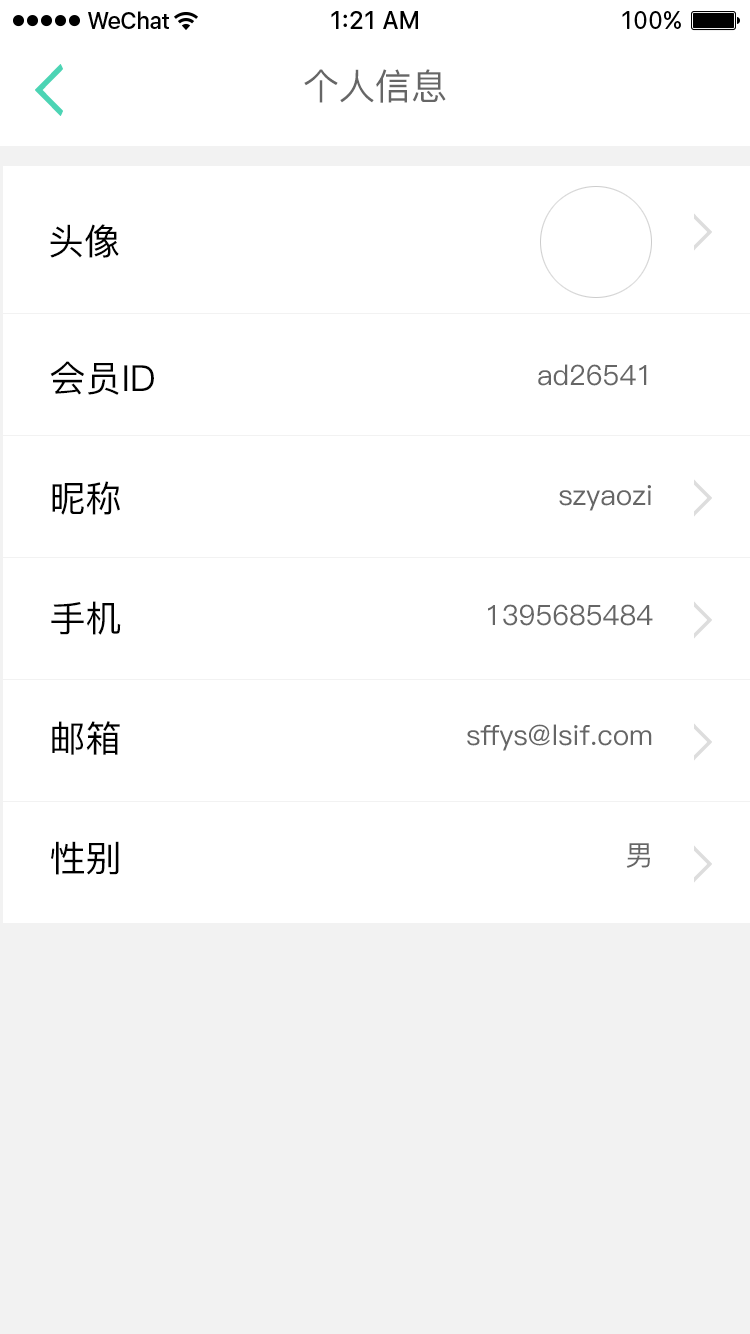
<style>
.page{position:relative;width:750px;height:1334px;background:#ffffff}
.page>*{position:absolute;margin:0}
.t1{font:36px "PingFang-SC-Medium";color:#666666}
.t2{font:36px "PingFang-SC-Medium";color:#000000}
.t3{font:36px/120px "PingFang-SC-Medium";color:#000000}
.t4{font:28px/120px "PingFang-SC-Medium";color:#666666}
</style>
<div class="page">
<p class="t1" style="left:304px;top:69px;width:142px;height:34px">个人信息</p>
<p class="t2" style="left:50px;top:224px;width:69px;height:34px">头像</p>
<p class="t3" style="left:50px;top:361px;width:104px;height:514px">会员ID<br>昵称<br>手机<br>邮箱<br>性别</p>
<p class="t4" style="left:467px;top:364px;width:186px;height:504px;text-align:right">ad26541<br>szyaozi<br>1395685484<br>sffys@lsif.com<br>男</p>
</div>
